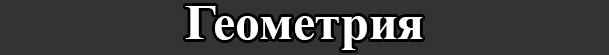
<style>
.page{position:relative;width:609px;height:55px;background:#333333}
.page>*{position:absolute;margin:0}
.t1{font:50.1px "TimesNewRomanPS-BoldMT";color:#ffffff}
</style>
<div class="page">
<p class="t1" style="left:185px;top:6px;width:238px;height:44px">Геометрия</p>
</div>
